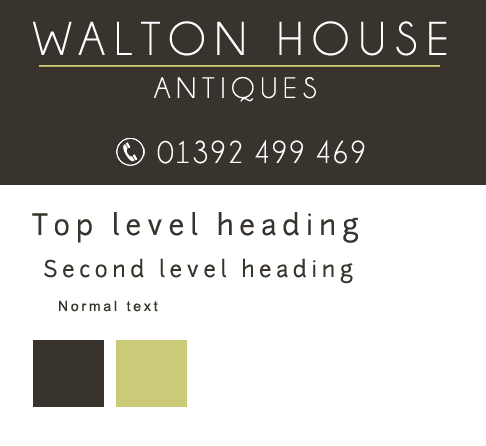
<style>
.page{position:relative;width:486px;height:446px;background:#ffffff}
.page>*{position:absolute;margin:0}
.t1{font:48px "Champagne&Limousines";letter-spacing:0.2em;color:#ffffff}
.t2{font:30px "Champagne&Limousines";letter-spacing:0.2em;color:#ffffff}
.t3{font:32px "Champagne&Limousines";letter-spacing:0.025em;color:#ffffff}
.t4{font:28px "junctionregular";letter-spacing:0.2em;color:#38332c}
.t5{font:22px "junctionregular";letter-spacing:0.2em;color:#38332c}
.t6{font:14px "ArialMT";letter-spacing:0.2em;color:#38332c}
</style>
<div class="page">
<p class="t1" style="left:33px;top:21px;width:414px;height:35px">WALTON HOUSE</p>
<p class="t2" style="left:153px;top:76px;width:163px;height:26px">ANTIQUES</p>
<p class="t3" style="left:157px;top:139px;width:208px;height:25px">01392 499 469</p>
<p class="t4" style="left:32px;top:212px;width:326px;height:31px">Top level heading</p>
<p class="t5" style="left:44px;top:258px;width:309px;height:26px">Second level heading</p>
<p class="t6" style="left:59px;top:300px;width:99px;height:12px">Normal text</p>
</div>
